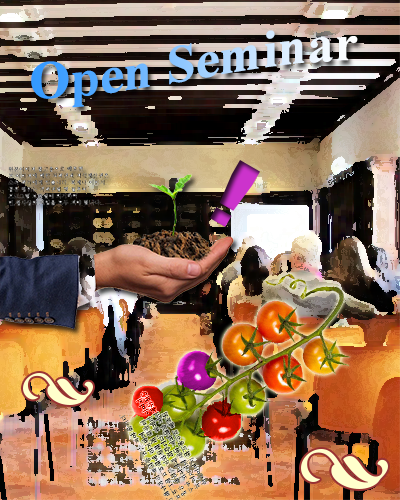
<style>
.page{position:relative;width:400px;height:500px}
.page>*{position:absolute;margin:0}
.t1{font:53px "TimesNewRomanPS-BoldMT"}
</style>
<div class="page">
<p class="t1" style="left:31px;top:30px;width:327px;height:78px">Open Seminar</p>
</div>
